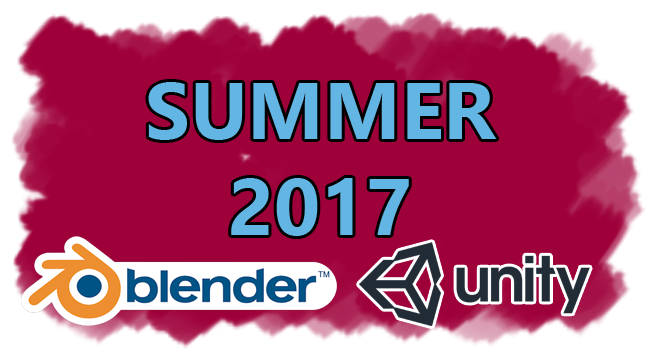
<style>
.page{position:relative;width:650px;height:350px;background:#9e0039}
.page>*{position:absolute;margin:0}
.t1{font:80px "SegoeUI-Bold";color:#63b5e4}
</style>
<div class="page">
<p class="t1" style="left:148px;top:82px;width:349px;height:154px;text-align:center">SUMMER<br>2017</p>
</div>
